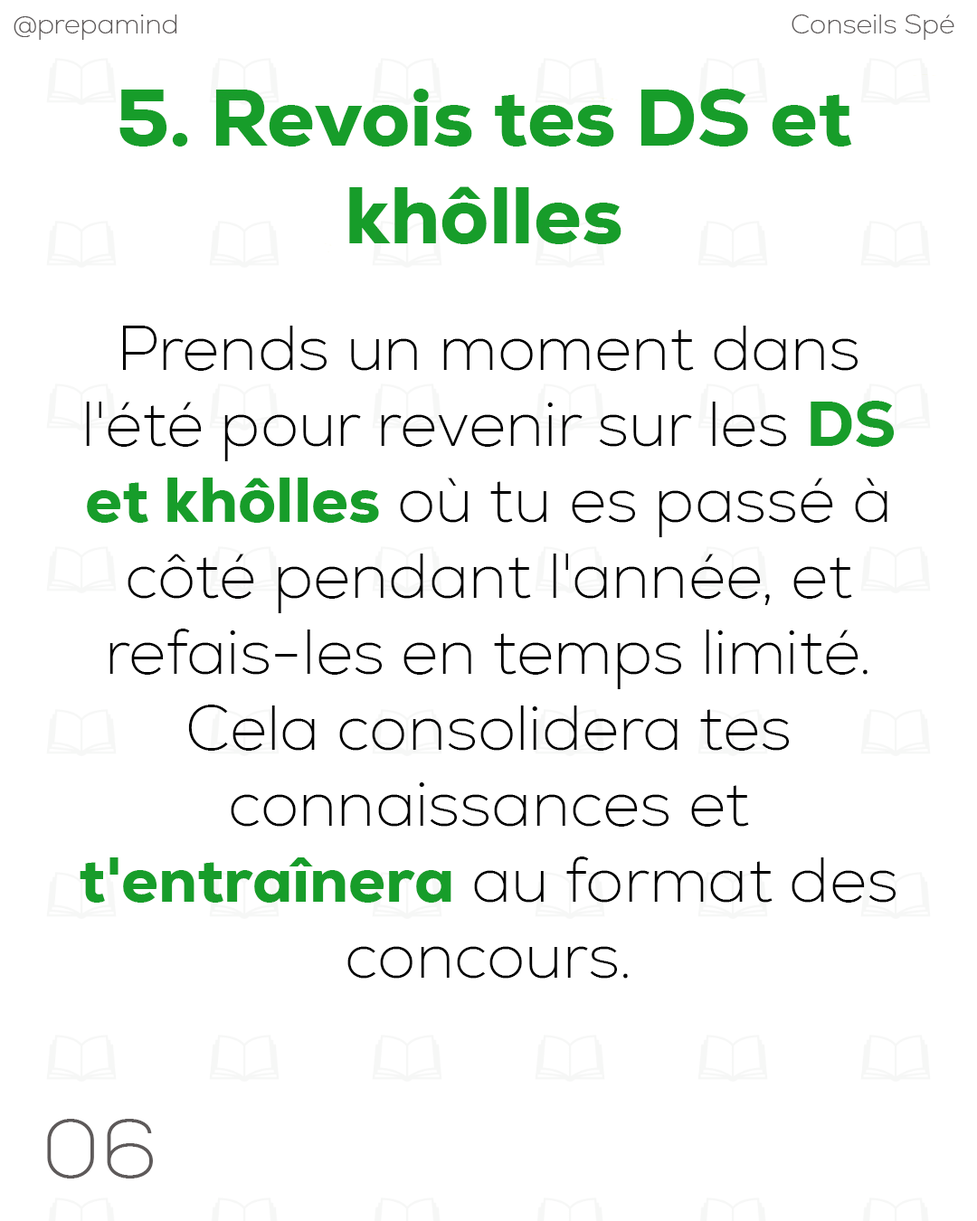
<style>
.page{position:relative;width:977px;height:1221px;background:#ffffff}
.page>*{position:absolute;margin:0}
.t1{font:27.1px "Nexa-ExtraLight";color:#5e5a5a}
.t2{font:81.2px "Nexa-Heavy";color:#179d2a}
.t3{font:63.3px "Nexa-ExtraLight";color:#000000}
.t4{font:63.3px "Nexa-Heavy";color:#179d2a}
.t5{font:81.7px "Nexa-ExtraLight";color:#5e5a5a}
</style>
<div class="page">
<p class="t1" style="left:14px;top:14px;width:163px;height:26px">@prepamind</p>
<p class="t1" style="left:791px;top:14px;width:163px;height:26px">Conseils Spé</p>
<p class="t2" style="left:119px;top:89px;width:733px;height:155px;text-align:center">5. Revois tes DS et khôlles</p>
<p class="t3" style="left:80px;top:326px;width:815px;height:653px;text-align:center">Prends un moment dans l'été pour revenir sur les <span class="t4">DS et khôlles</span> où tu es passé à côté pendant l'année, et refais-les en temps limité. Cela consolidera tes connaissances et <span class="t4">t'entraînera</span> au format des concours.</p>
<p class="t5" style="left:47px;top:1119px;width:106px;height:59px">06</p>
</div>
